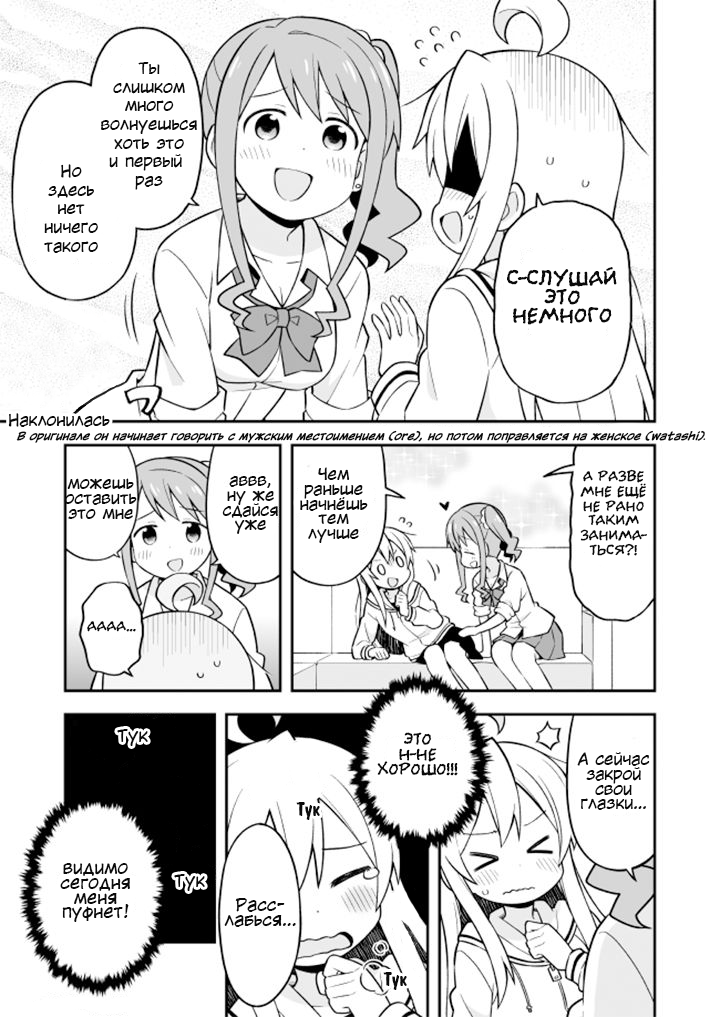
<style>
.page{position:relative;width:720px;height:1017px;background:#ffffff}
.page>*{position:absolute;margin:0}
.t1{font:16px/18.7px "KuraiVoice2";color:#0b0b0b}
.t2{font:24px/18.7px "el_CCEvilSchemes";color:#0b0b0b}
.t3{font:16px "KuraiVoice2";color:#0b0b0b}
.t4{font:10.7px "KuraiVoice2-BoldItalic";color:#0b0b0b}
.t5{font:9.3px "KuraiVoice2";color:#0b0b0b}
.t6{font:16px/14.7px "KuraiVoice2";color:#0b0b0b}
.t7{font:16px/14.7px "el_CCEvilSchemes";color:#0b0b0b}
.t8{font:16px "el_CCEvilSchemes";color:#0b0b0b}
.t9{font:17.3px "KuraiVoice2";color:#0b0b0b}
.t10{font:18.7px/14.7px "el_CCEvilSchemes";color:#0b0b0b}
.t11{font:18.7px "ADomInoBold";color:#0b0b0b}
.t12{font:17.3px/14.7px "KuraiVoice2";color:#0b0b0b}
</style>
<div class="page">
<p class="t1" style="left:101px;top:62px;width:96px;height:128px;text-align:center">Ты<br>слишком<br>много<br>волнуешься<br>хоть это<br>и первый <br>раз</p>
<p class="t1" style="left:44px;top:164px;width:54px;height:89px;text-align:center">Но<br>здесь<br>нет<br>ничего<br>такого</p>
<p class="t2" style="left:507px;top:267px;width:110px;height:58px;text-align:center">С-слушай<br>это<br>немного</p>
<p class="t3" style="left:8px;top:413px;width:102px;height:14px">Наклонилась</p>
<p class="t4" style="left:16px;top:430px;width:690px;height:13px">В оригинале он начинает говорить с мужским местоимением (ore), но потом поправляется на женское (watashi)<span class="t5">.</span></p>
<p class="t6" style="left:300px;top:467px;width:68px;height:76px;text-align:center">Чем<br>раньше<br>начнёшь<br>тем<br>лучше</p>
<p class="t7" style="left:580px;top:469px;width:67px;height:87px;text-align:center">А разве<br>мне ещё<br>не рано<br>таким<br>занима-<br>ться?!</p>
<p class="t6" style="left:64px;top:478px;width:73px;height:41px;text-align:center">можешь<br>оставить<br>это мне</p>
<p class="t6" style="left:222px;top:476px;width:56px;height:58px;text-align:center">аввв,<br>ну же<br>сдайся<br>уже</p>
<p class="t8" style="left:87px;top:621px;width:49px;height:11px">Аааа...</p>
<p class="t9" style="left:117px;top:729px;width:31px;height:17px">Тук</p>
<p class="t10" style="left:377px;top:732px;width:81px;height:44px;text-align:center">Это<br>н-не<br>хорошо!!!</p>
<p class="t6" style="left:577px;top:752px;width:73px;height:58px;text-align:center">А сейчас<br>закрой<br>свои<br>глазки...</p>
<p class="t11" style="left:296px;top:802px;width:24px;height:18px">Тук</p>
<p class="t12" style="left:60px;top:863px;width:70px;height:59px;text-align:center">видимо<br>сегодня<br>меня<br>пуфнет!</p>
<p class="t9" style="left:174px;top:874px;width:31px;height:17px">Тук</p>
<p class="t12" style="left:224px;top:898px;width:72px;height:29px;text-align:center">Расс-<br>лабься...</p>
<p class="t11" style="left:383px;top:972px;width:24px;height:18px">Тук</p>
</div>
